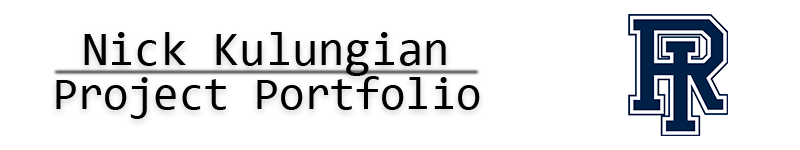
<style>
.page{position:relative;width:800px;height:150px;background:#ffffff}
.page>*{position:absolute;margin:0}
.t1{font:47.8px "Consolas";color:#000000}
.t2{font:45.8px "Consolas";color:#000000}
</style>
<div class="page">
<p class="t1" style="left:84px;top:32px;width:362px;height:44px">Nick Kulungian</p>
<p class="t2" style="left:56px;top:76px;width:424px;height:43px">Project Portfolio</p>
</div>
